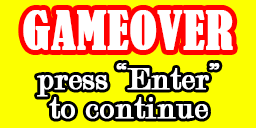
<style>
.page{position:relative;width:256px;height:128px;background:#fcff00}
.page>*{position:absolute;margin:0}
.t1{font:50px "BernardMT-Condensed";color:#ffffff;font-weight:bold}
.t2{font:33.3px/29.2px "Modern-Regular";color:#ffffff;font-weight:bold}
</style>
<div class="page">
<p class="t1" style="left:23px;top:10px;width:210px;height:40px">GAMEOVER</p>
<p class="t2" style="left:37px;top:63px;width:183px;height:56px;text-align:center">press “Enter”<br>to continue</p>
</div>
